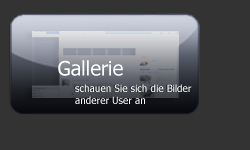
<style>
.page{position:relative;width:250px;height:150px;background:#333333}
.page>*{position:absolute;margin:0}
.t1{font:19.9px "Tahoma";color:#ffffff}
.t2{font:10px "Tahoma";color:#ffffff}
</style>
<div class="page">
<p class="t1" style="left:58px;top:60px;width:65px;height:16px">Gallerie</p>
<p class="t2" style="left:75px;top:84px;width:117px;height:20px">schauen Sie sich die Bilder<br>anderer User an</p>
</div>
